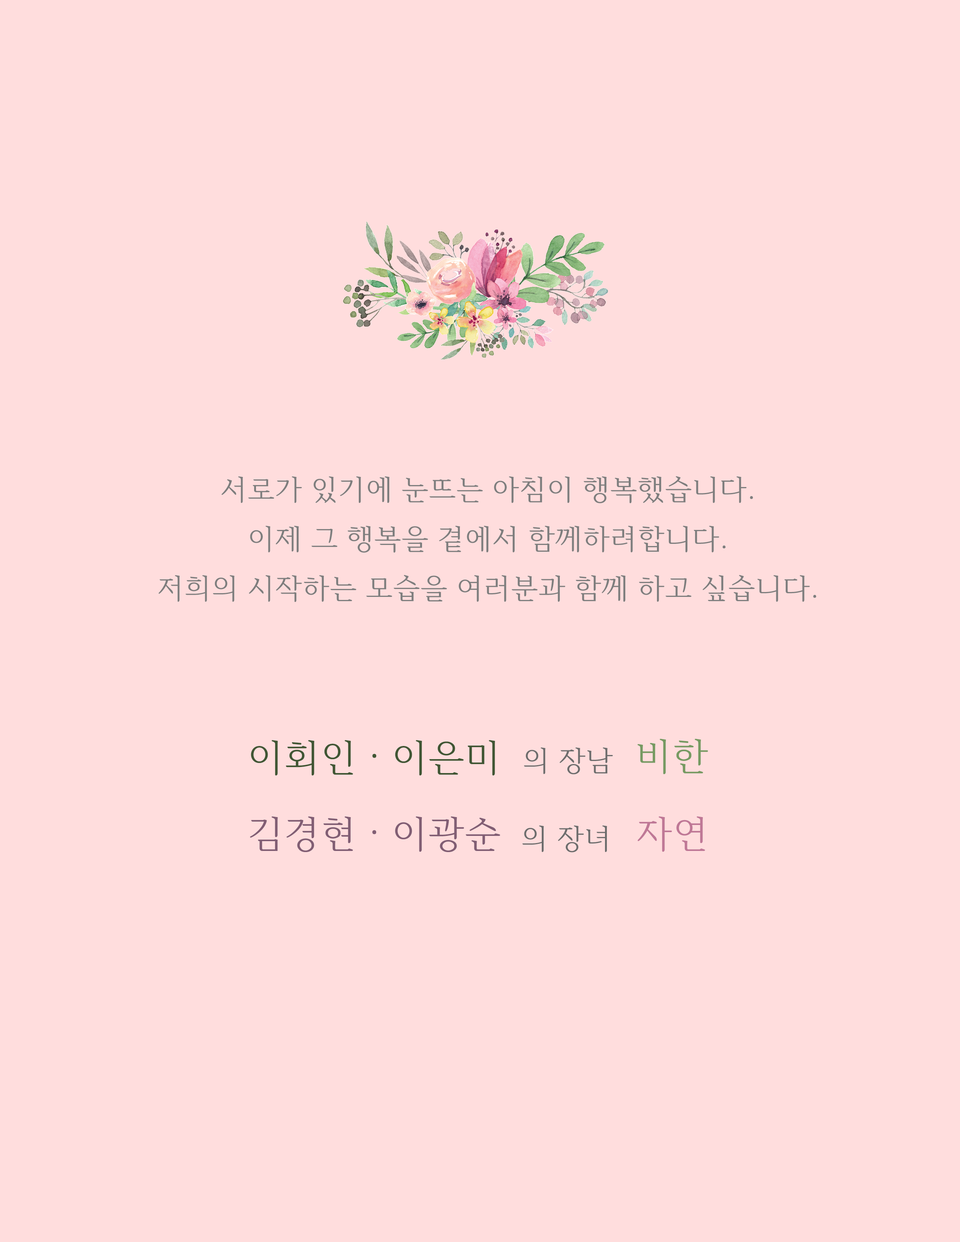
<style>
.page{position:relative;width:960px;height:1242px;background:#ffdddd}
.page>*{position:absolute;margin:0}
.t1{font:28.2px "HCRBatang";color:#7e7e7e}
.t2{font:37.6px "HCRBatang";color:#405634}
.t3{font:28.2px "HCRBatang";color:#6d6d6d}
.t4{font:37.6px "HCRBatang";color:#769a62}
.t5{font:37.6px "HCRBatang";color:#815e74}
.t6{font:37.6px "HCRBatang";color:#bf7896}
</style>
<div class="page">
<p class="t1" style="left:158px;top:476px;width:658px;height:126px;text-align:center">서로가 있기에 눈뜨는 아침이 행복했습니다. <br>이제 그 행복을 곁에서 함께하려합니다. <br>저희의 시작하는 모습을 여러분과 함께 하고 싶습니다.</p>
<p class="t2" style="left:251px;top:740px;width:244px;height:36px">이회인 · 이은미</p>
<p class="t3" style="left:524px;top:748px;width:89px;height:27px">의 장남</p>
<p class="t4" style="left:637px;top:739px;width:71px;height:35px">비한</p>
<p class="t5" style="left:250px;top:816px;width:250px;height:36px">김경현 · 이광순</p>
<p class="t6" style="left:637px;top:816px;width:68px;height:36px">자연</p>
<p class="t3" style="left:522px;top:826px;width:85px;height:27px">의 장녀</p>
</div>
